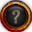
<style>
.page{position:relative;width:32px;height:32px}
.page>*{position:absolute;margin:0}
.t1{font:24px "Gabriola";letter-spacing:0.04em;color:#816f5a;font-weight:bold}
</style>
<div class="page">
<p class="t1" style="left:12px;top:10px;width:9px;height:14px">?</p>
</div>
